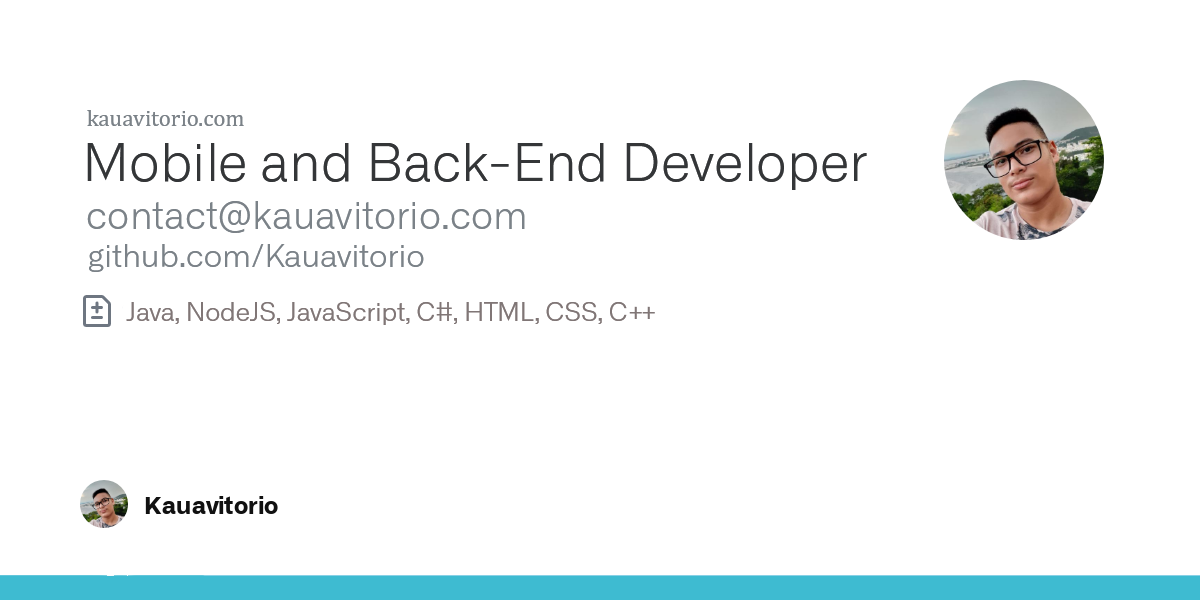
<style>
.page{position:relative;width:1200px;height:600px;background:#ffffff}
.page>*{position:absolute;margin:0}
.t1{font:22.9px "Cambria";color:#7b8288}
.t2{font:52.1px "AllianceNo.1-Light";color:#343638}
.t3{font:37.5px "AllianceNo.1-Light";color:#7b8288}
.t4{font:31.2px "AllianceNo.1-Light";color:#7b8288}
.t5{font:25px "AllianceNo.1-Light";color:#807676}
</style>
<div class="page">
<p class="t1" style="left:87px;top:110px;width:157px;height:16px">kauavitorio.com</p>
<p class="t2" style="left:87px;top:143px;width:780px;height:47px">Mobile and Back-End Developer</p>
<p class="t3" style="left:87px;top:201px;width:438px;height:32px">contact@kauavitorio.com</p>
<p class="t4" style="left:89px;top:244px;width:335px;height:28px">github.com/Kauavitorio</p>
<p class="t5" style="left:126px;top:302px;width:529px;height:23px">Java, NodeJS, JavaScript, C#, HTML, CSS, C++</p>
</div>
